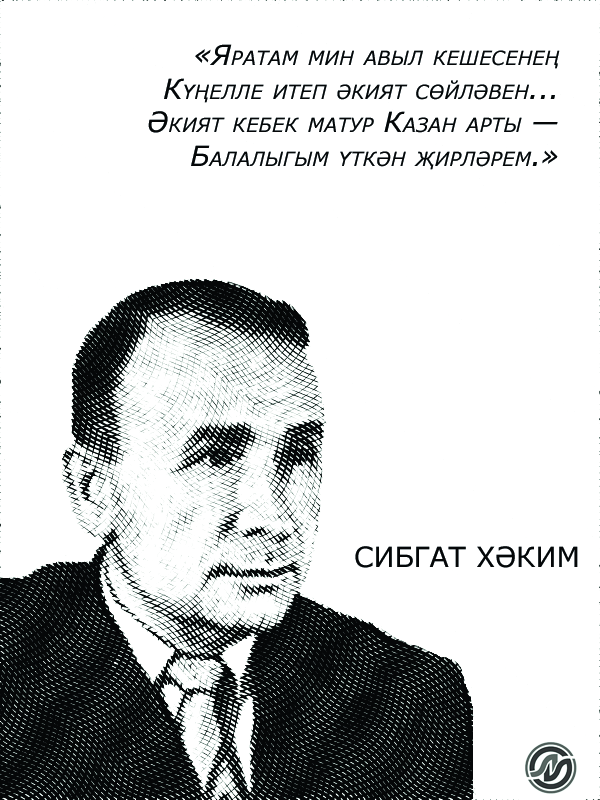
<style>
.page{position:relative;width:600px;height:800px;background:#ffffff}
.page>*{position:absolute;margin:0}
.t1{font:28px "Verdana-Italic";color:#000000;font-variant:small-caps}
.t2{font:28px "Verdana";color:#050708;text-transform:uppercase}
</style>
<div class="page">
<p class="t1" style="left:148px;top:44px;width:412px;height:126px;text-align:right">«Яратам мин авыл кешесенең<br>Күңелле итеп әкият сөйләвен...<br>Әкият кебек матур Казан арты —<br>Балалыгым үткән җирләрем.»</p>
<p class="t2" style="left:355px;top:546px;width:223px;height:22px">Сибгат Хәким</p>
</div>
